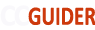
<style>
.page{position:relative;width:95px;height:30px;background:#ffffff}
.page>*{position:absolute;margin:0}
.t1{font:31px "Calibri-Bold";letter-spacing:0.075em;color:#f9f8fb;scale:0.97 1}
.t2{font:26.6px "Calibri-Bold";color:#cd390c;scale:0.79 1}
</style>
<div class="page">
<p class="t1" style="left:0px;top:5px;width:15px;height:21px">C</p>
<p class="t1" style="left:14px;top:5px;width:15px;height:21px">C</p>
<p class="t2" style="left:28px;top:7px;width:68px;height:19px">GUIDER</p>
</div>
